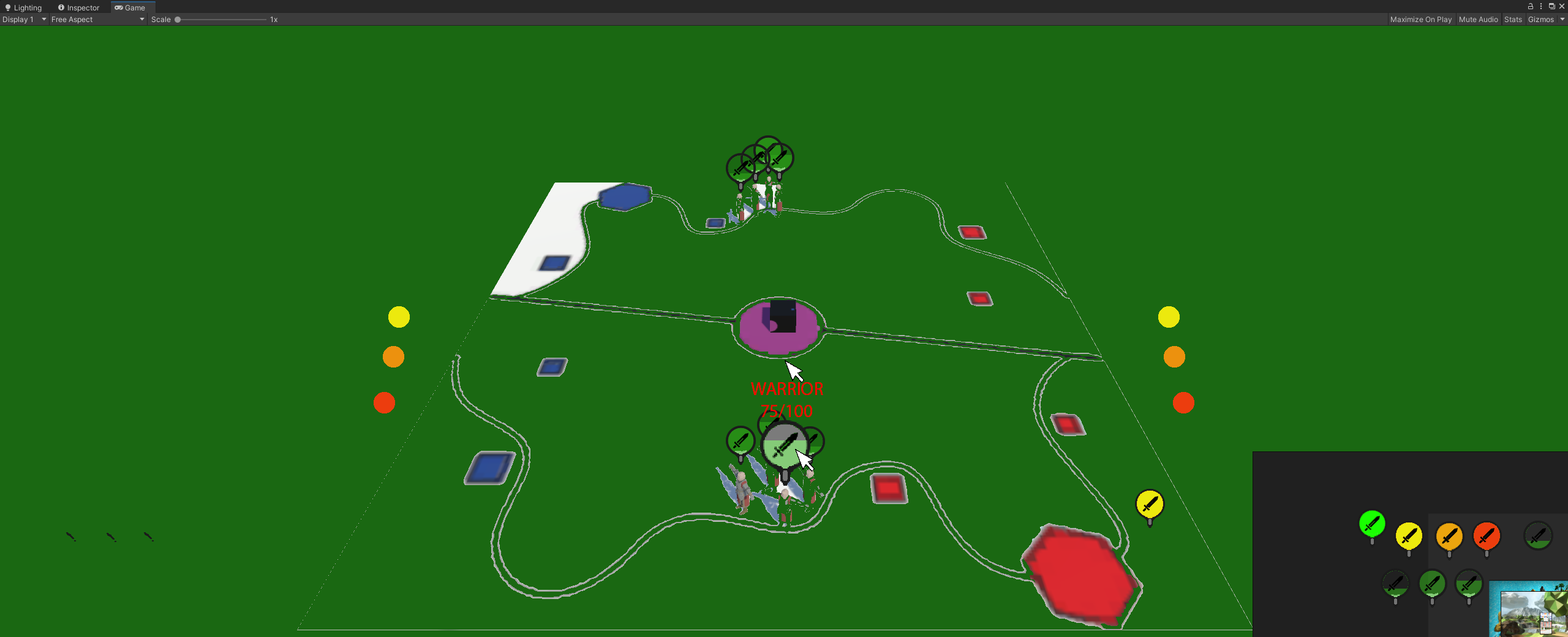
<style>
.page{position:relative;width:1568px;height:637px;background:#1a6812}
.page>*{position:absolute;margin:0}
.t1{font:18.4px "MyriadPro-Regular";color:#ff0000}
</style>
<div class="page">
<p class="t1" style="left:751px;top:382px;width:72px;height:36px;text-align:center">WARRIOR<br>75/100</p>
</div>
